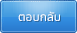
<style>
.page{position:relative;width:77px;height:33px}
.page>*{position:absolute;margin:0}
.t1{font:12px "NotoSansThai-Regular";color:#ffffff}
</style>
<div class="page">
<p class="t1" style="left:18px;top:11px;width:42px;height:10px">ตอบกลับ</p>
</div>
